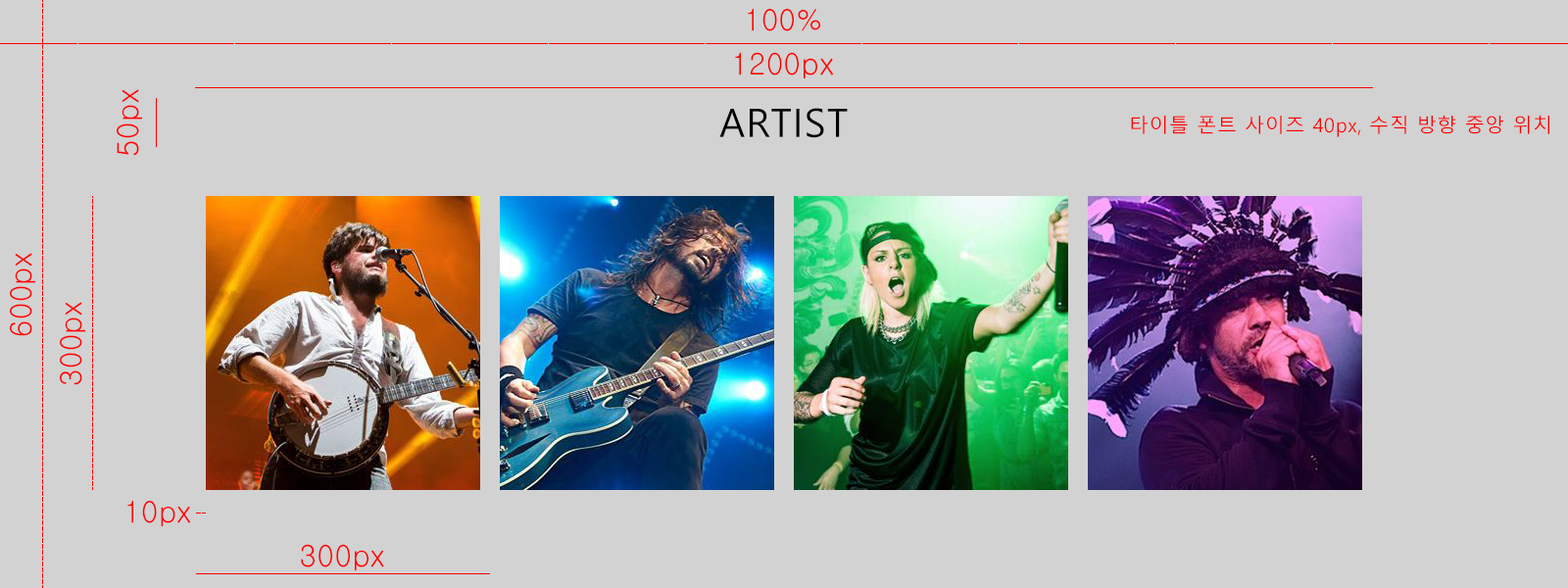
<style>
.page{position:relative;width:1568px;height:588px;background:#d2d2d2}
.page>*{position:absolute;margin:0}
.t1{font:29.4px "Gulim";letter-spacing:0.03em;color:#ff0000}
.t2{font:29.7px "Gulim";letter-spacing:0.03em;color:#ff0000}
.t3{font:39.2px "MalgunGothic";letter-spacing:0.03em;color:#000000}
.t4{font:19.6px "MalgunGothic";letter-spacing:0.03em;color:#ff0000}
.t5{font:29.3px "Gulim";letter-spacing:0.03em;color:#ff0000}
.t6{font:29.6px "Gulim";letter-spacing:0.03em;color:#ff0000}
</style>
<div class="page">
<p class="t1" style="left:748px;top:9px;width:72px;height:22px">100%</p>
<p class="t2" style="left:735px;top:52px;width:98px;height:27px">1200px</p>
<p class="t1" style="left:117px;top:89px;width:26px;height:67px;rotate:-90deg">50px</p>
<p class="t3" style="left:719px;top:108px;width:129px;height:30px">ARTIST</p>
<p class="t4" style="left:1131px;top:115px;width:418px;height:22px">타이틀 폰트 사이즈 40px, 수직 방향 중앙 위치</p>
<p class="t1" style="left:10px;top:253px;width:26px;height:83px;rotate:-90deg">600px</p>
<p class="t1" style="left:60px;top:302px;width:26px;height:83px;rotate:-90deg">300px</p>
<p class="t5" style="left:127px;top:501px;width:63px;height:26px">10px</p>
<p class="t6" style="left:301px;top:544px;width:83px;height:27px">300px</p>
</div>
